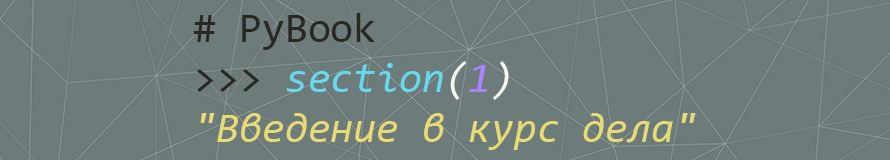
<style>
.page{position:relative;width:890px;height:160px;background:#6e7b7b}
.page>*{position:absolute;margin:0}
.t1{font:41.7px "Consolas-Italic";color:#e6db74}
.t2{font:41.7px "Consolas";color:#272822}
.t3{font:41.7px "Consolas-Italic";color:#66d9ef}
.t4{font:41.7px "Consolas-Italic";color:#f8f8f2}
.t5{font:41.7px "Consolas-Italic";color:#ae81ff}
</style>
<div class="page">
<p class="t1" style="left:193px;top:13px;width:503px;height:137px"><span class="t2"># PyBook<br>&gt;&gt;&gt; </span><span class="t3">section</span><span class="t4">(</span><span class="t5">1</span><span class="t4">)<br></span>"Введение в курс дела"</p>
</div>
